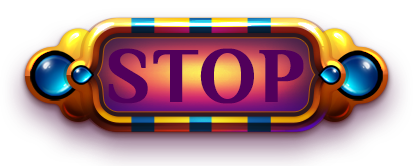
<style>
.page{position:relative;width:413px;height:166px}
.page>*{position:absolute;margin:0}
.t1{font:77.3px "ElMessiri-Bold";letter-spacing:0.025em;color:#51005b;text-transform:uppercase;font-weight:bold}
</style>
<div class="page">
<p class="t1" style="left:108px;top:48px;width:196px;height:56px">STOP</p>
</div>
